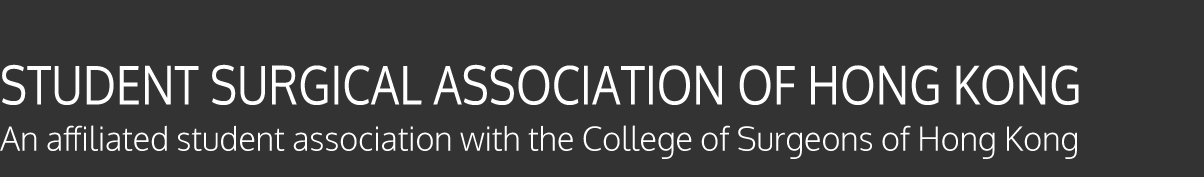
<style>
.page{position:relative;width:1204px;height:177px;background:#333333}
.page>*{position:absolute;margin:0}
.t1{font:53.3px "Oxygen-Regular";color:#ffffff;scale:0.85 1}
.t2{font:33.3px "Oxygen-Light";color:#ffffff}
</style>
<div class="page">
<p class="t1" style="left:2px;top:64px;width:1077px;height:41px">STUDENT SURGICAL ASSOCIATION OF HONG KONG</p>
<p class="t2" style="left:0px;top:125px;width:1077px;height:34px">An affiliated student association with the College of Surgeons of Hong Kong</p>
</div>
